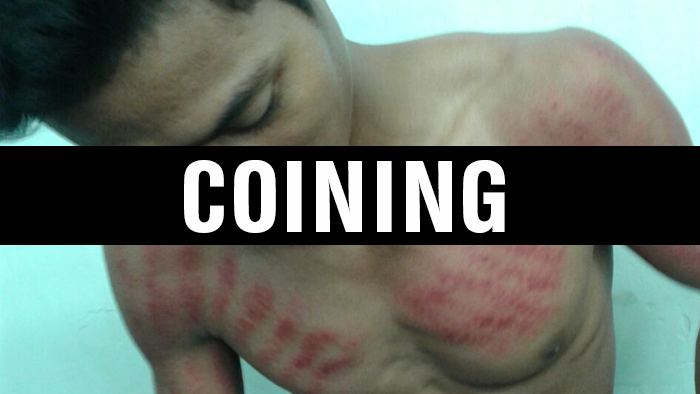
<style>
.page{position:relative;width:700px;height:394px}
.page>*{position:absolute;margin:0}
.t1{font:100px "AGBuchCondensedBQ-Medium";color:#fefefe}
</style>
<div class="page">
<p class="t1" style="left:184px;top:160px;width:321px;height:73px">COINING</p>
</div>
